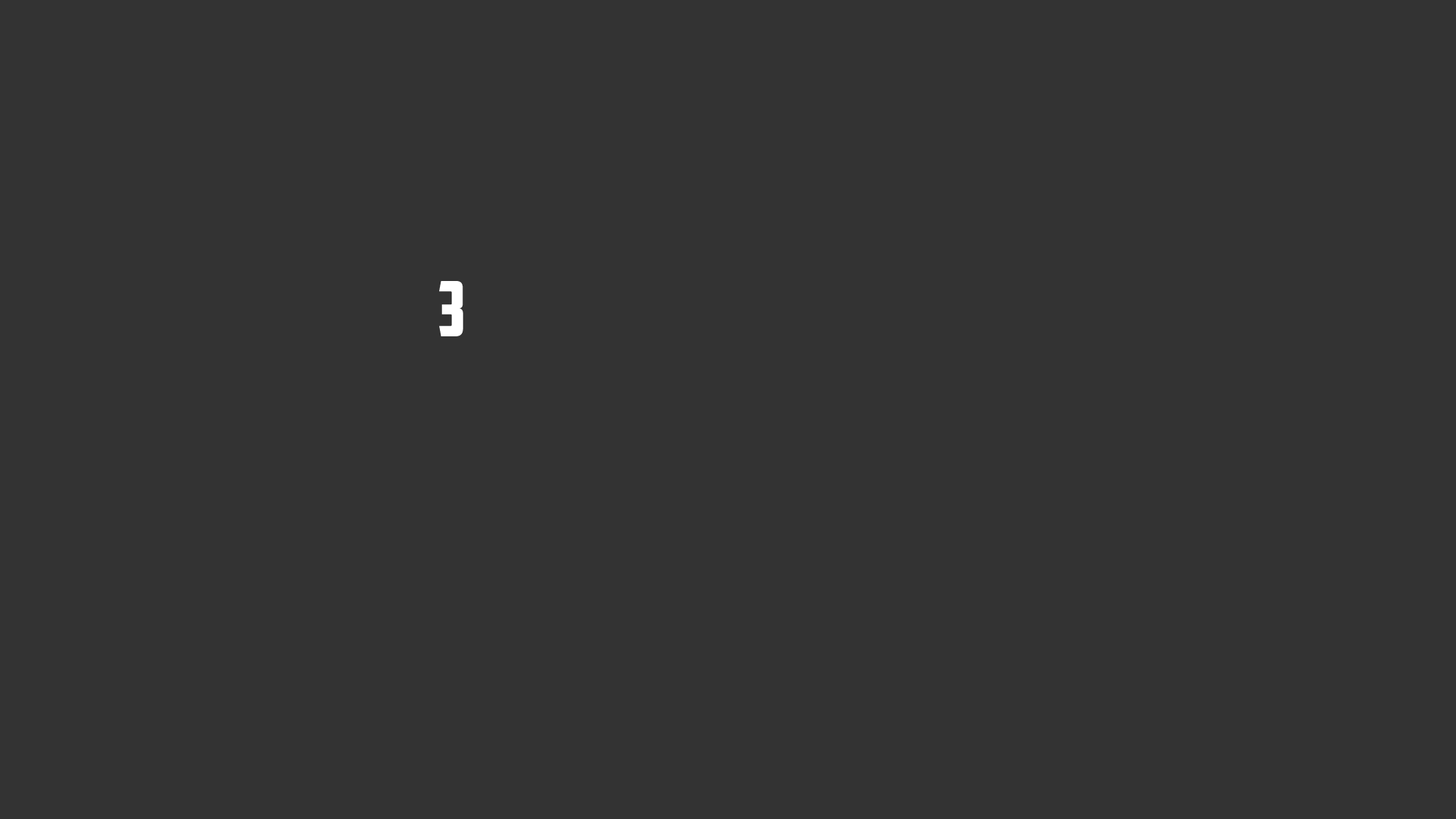
<style>
.page{position:relative;width:1456px;height:819px;background:#333333}
.page>*{position:absolute;margin:0}
.t1{font:75.9px "AmericanCaptain";color:#ffffff}
</style>
<div class="page">
<p class="t1" style="left:439px;top:281px;width:24px;height:55px">3</p>
</div>
